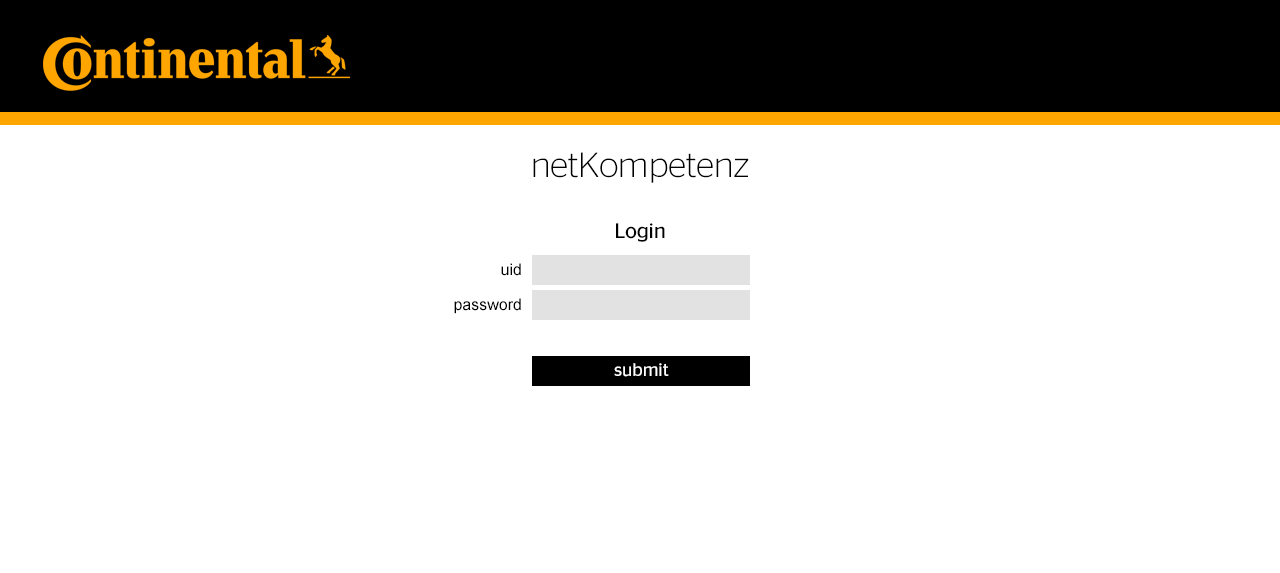
<style>
.page{position:relative;width:1280px;height:573px;background:#ffffff}
.page>*{position:absolute;margin:0}
.t1{font:35.1px "ContinentalStagSans-Light";color:#000000}
.t2{font:21px "ContinentalStagSans-Book";color:#000000}
.t3{font:16px/35px "ArialMT";color:#000000}
.t4{font:18.1px "ContinentalStagSans-Book";color:#ffffff}
</style>
<div class="page">
<p class="t1" style="left:533px;top:152px;width:216px;height:31px">netKompetenz</p>
<p class="t2" style="left:616px;top:223px;width:49px;height:19px">Login</p>
<p class="t3" style="left:454px;top:263px;width:67px;height:51px;text-align:right">uid<br>password</p>
<p class="t4" style="left:614px;top:363px;width:55px;height:14px">submit</p>
</div>
